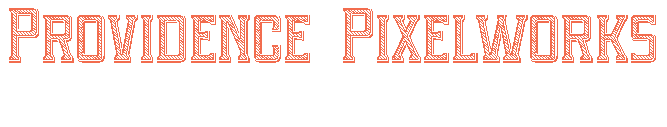
<style>
.page{position:relative;width:667px;height:127px;background:#ffffff}
.page>*{position:absolute;margin:0}
.t1{font:72px "Portsmouth-Loaded";color:#f26c4e}
</style>
<div class="page">
<p class="t1" style="left:9px;top:8px;width:647px;height:55px">Providence Pixelworks</p>
</div>
